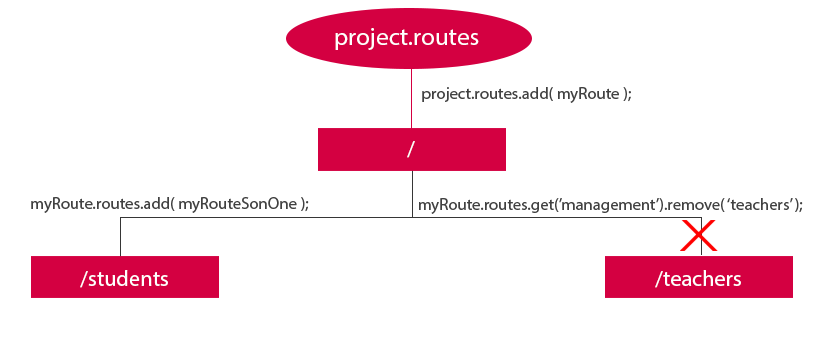
<style>
.page{position:relative;width:822px;height:339px;background:#ffffff}
.page>*{position:absolute;margin:0}
.t1{font:25px "MyriadPro-Regular";color:#ffffff}
.t2{font:16.7px "MyriadPro-Regular";color:#414141}
.t3{font:22.2px "MyriadPro-Regular";color:#ffffff}
</style>
<div class="page">
<p class="t1" style="left:335px;top:28px;width:144px;height:22px">project.routes</p>
<p class="t2" style="left:422px;top:87px;width:209px;height:16px">project.routes.add( myRoute );</p>
<p class="t3" style="left:407px;top:141px;width:8px;height:17px">/</p>
<p class="t2" style="left:31px;top:197px;width:278px;height:16px">myRoute.routes.add( myRouteSonOne );</p>
<p class="t2" style="left:419px;top:198px;width:384px;height:16px">myRoute.routes.get(’management’).remove( ‘teachers’ );</p>
<p class="t3" style="left:80px;top:270px;width:88px;height:18px">/students</p>
<p class="t3" style="left:655px;top:270px;width:86px;height:18px">/teachers</p>
</div>
